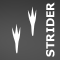
<style>
.page{position:relative;width:60px;height:60px}
.page>*{position:absolute;margin:0}
.t1{font:11px "Verdana-Bold";color:#ffffff}
</style>
<div class="page">
<p class="t1" style="left:46px;top:2px;width:9px;height:55px;rotate:-90deg">STRIDER</p>
</div>
